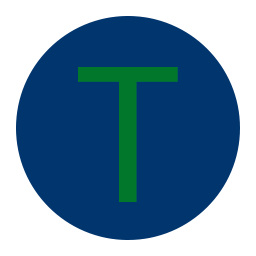
<style>
.page{position:relative;width:256px;height:256px;background:#00356e}
.page>*{position:absolute;margin:0}
.t1{font:200px "MyriadPro-Regular";color:#00772b}
</style>
<div class="page">
<p class="t1" style="left:78px;top:67px;width:100px;height:135px">T</p>
</div>
